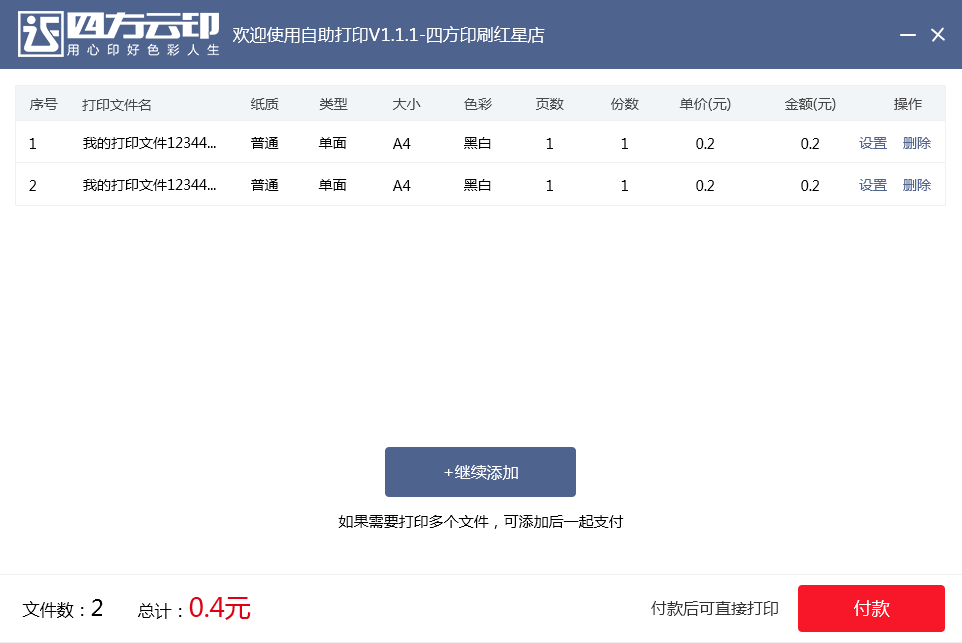
<style>
.page{position:relative;width:962px;height:643px;background:#ffffff}
.page>*{position:absolute;margin:0}
.t1{font:17px "MicrosoftYaHei";color:#ffffff}
.t2{font:14px "MicrosoftYaHei";color:#474747}
.t3{font:14px "MicrosoftYaHei";color:#000000}
.t4{font:14px "MicrosoftYaHei";color:#4f638f}
.t5{font:16px "MicrosoftYaHei";color:#ffffff}
.t6{font:15px "MicrosoftYaHei";color:#010101}
.t7{font:17px "MicrosoftYaHei";color:#000000}
.t8{font:22px "MicrosoftYaHei";color:#000000}
.t9{font:26px "MicrosoftYaHei";color:#df0011}
.t10{font:12px "MicrosoftYaHei";color:#303030}
.t11{font:18px "MicrosoftYaHei";color:#ffffff}
</style>
<div class="page">
<p class="t1" style="left:233px;top:26px;width:312px;height:17px">欢迎使用自助打印V1.1.1-四方印刷红星店</p>
<p class="t2" style="left:30px;top:98px;width:28px;height:12px">序号</p>
<p class="t2" style="left:82px;top:99px;width:69px;height:12px">打印文件名</p>
<p class="t2" style="left:251px;top:98px;width:28px;height:12px">纸质</p>
<p class="t2" style="left:319px;top:98px;width:29px;height:12px">类型</p>
<p class="t2" style="left:393px;top:98px;width:28px;height:12px">大小</p>
<p class="t2" style="left:464px;top:98px;width:28px;height:12px">色彩</p>
<p class="t2" style="left:536px;top:98px;width:28px;height:12px">页数</p>
<p class="t2" style="left:611px;top:98px;width:28px;height:12px">份数</p>
<p class="t2" style="left:679px;top:98px;width:52px;height:13px">单价(元)</p>
<p class="t2" style="left:785px;top:98px;width:51px;height:13px">金额(元)</p>
<p class="t2" style="left:894px;top:98px;width:28px;height:12px">操作</p>
<p class="t3" style="left:83px;top:137px;width:133px;height:12px">我的打印文件12344...</p>
<p class="t3" style="left:251px;top:137px;width:28px;height:12px">普通</p>
<p class="t3" style="left:318px;top:137px;width:29px;height:12px">单面</p>
<p class="t3" style="left:464px;top:137px;width:27px;height:12px">黑白</p>
<p class="t4" style="left:859px;top:137px;width:72px;height:12px">设置    删除</p>
<p class="t3" style="left:29px;top:138px;width:7px;height:11px">1</p>
<p class="t3" style="left:393px;top:138px;width:18px;height:11px">A4</p>
<p class="t3" style="left:546px;top:138px;width:7px;height:11px">1</p>
<p class="t3" style="left:621px;top:138px;width:7px;height:11px">1</p>
<p class="t3" style="left:696px;top:138px;width:18px;height:11px">0.2</p>
<p class="t3" style="left:801px;top:138px;width:18px;height:11px">0.2</p>
<p class="t3" style="left:29px;top:180px;width:7px;height:11px">2</p>
<p class="t3" style="left:83px;top:179px;width:133px;height:12px">我的打印文件12344...</p>
<p class="t3" style="left:251px;top:179px;width:28px;height:12px">普通</p>
<p class="t3" style="left:318px;top:179px;width:29px;height:12px">单面</p>
<p class="t3" style="left:393px;top:180px;width:18px;height:11px">A4</p>
<p class="t3" style="left:464px;top:179px;width:27px;height:12px">黑白</p>
<p class="t3" style="left:546px;top:180px;width:7px;height:11px">1</p>
<p class="t3" style="left:621px;top:180px;width:7px;height:11px">1</p>
<p class="t3" style="left:696px;top:180px;width:18px;height:11px">0.2</p>
<p class="t3" style="left:801px;top:180px;width:18px;height:11px">0.2</p>
<p class="t4" style="left:859px;top:179px;width:72px;height:12px">设置    删除</p>
<p class="t5" style="left:444px;top:465px;width:74px;height:15px">+继续添加</p>
<p class="t6" style="left:338px;top:515px;width:286px;height:14px">如果需要打印多个文件，可添加后一起支付</p>
<p class="t7" style="left:22px;top:599px;width:81px;height:19px">文件数：<span class="t8">2</span></p>
<p class="t9" style="left:138px;top:597px;width:113px;height:23px"><span class="t7">总计：</span>0.4元</p>
<p class="t10" style="left:651px;top:601px;width:127px;height:15px">付款后可直接打印</p>
<p class="t11" style="left:854px;top:600px;width:36px;height:17px">付款</p>
</div>
